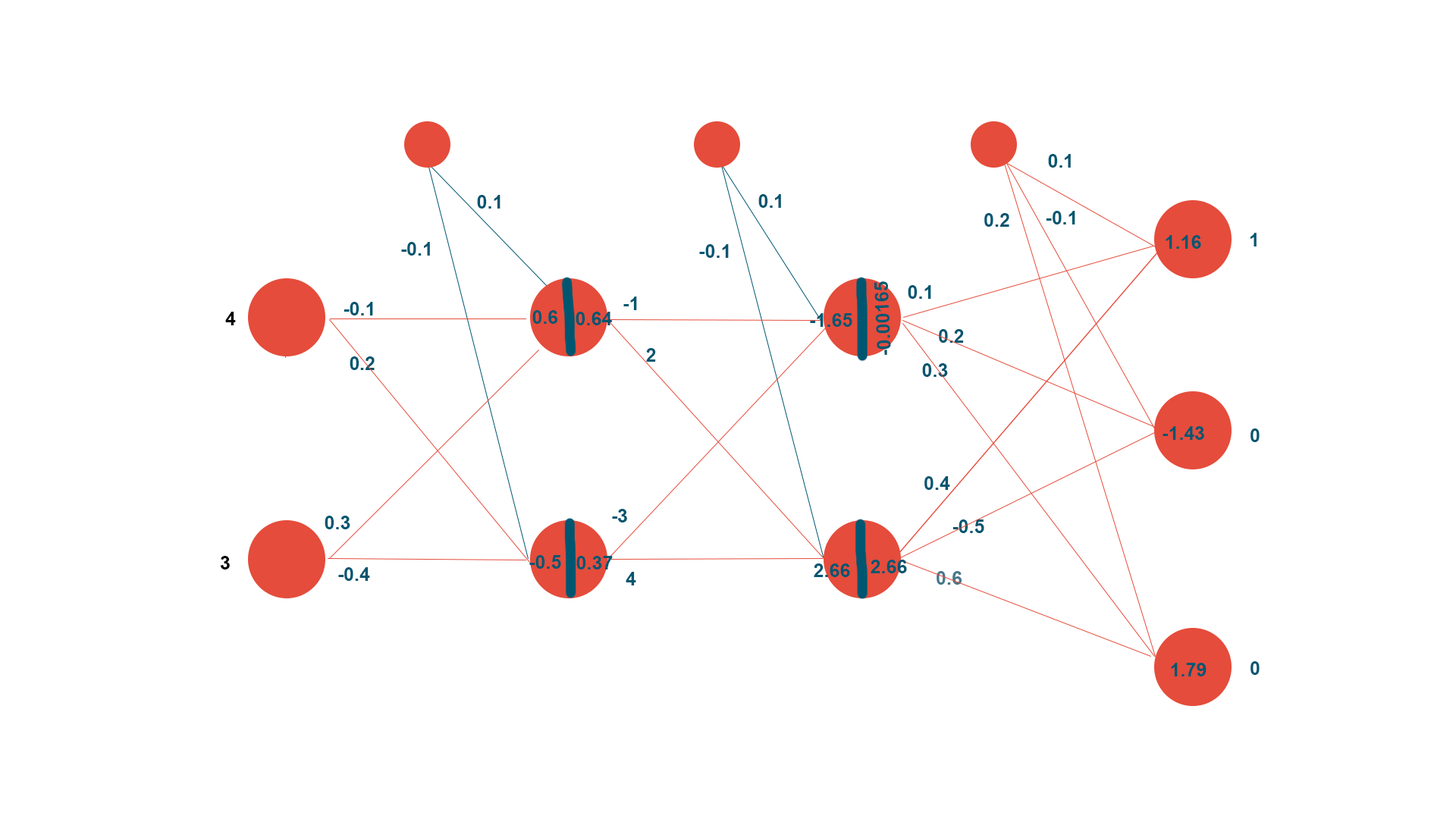
<style>
.page{position:relative;width:1456px;height:819px;background:#ffffff}
.page>*{position:absolute;margin:0}
.t1{font:19px "Arial-BoldMT";color:#005670}
.t2{font:19px "Arial-BoldMT";color:#000000}
.t3{font:19px "Arial-BoldMT";color:#47788b}
</style>
<div class="page">
<p class="t1" style="left:1048px;top:154px;width:23px;height:14px">0.1</p>
<p class="t1" style="left:477px;top:195px;width:23px;height:14px">0.1</p>
<p class="t1" style="left:758px;top:194px;width:23px;height:14px">0.1</p>
<p class="t1" style="left:984px;top:213px;width:25px;height:14px">0.2</p>
<p class="t1" style="left:1046px;top:211px;width:29px;height:13px">-0.1</p>
<p class="t1" style="left:1250px;top:233px;width:7px;height:13px">1</p>
<p class="t1" style="left:401px;top:242px;width:29px;height:14px">-0.1</p>
<p class="t1" style="left:699px;top:244px;width:30px;height:14px">-0.1</p>
<p class="t1" style="left:1166px;top:235px;width:35px;height:14px">1.16</p>
<p class="t1" style="left:874px;top:281px;width:17px;height:74px;rotate:-93deg">-0.00165</p>
<p class="t1" style="left:908px;top:285px;width:23px;height:14px">0.1</p>
<p class="t1" style="left:344px;top:302px;width:29px;height:13px">-0.1</p>
<p class="t1" style="left:623px;top:297px;width:14px;height:13px">-1</p>
<p class="t2" style="left:225px;top:312px;width:11px;height:13px">4</p>
<p class="t1" style="left:532px;top:310px;width:26px;height:14px">0.6</p>
<p class="t1" style="left:576px;top:312px;width:36px;height:13px">0.64</p>
<p class="t1" style="left:810px;top:313px;width:42px;height:14px">-1.65</p>
<p class="t1" style="left:939px;top:329px;width:25px;height:14px">0.2</p>
<p class="t1" style="left:646px;top:348px;width:10px;height:14px">2</p>
<p class="t1" style="left:350px;top:356px;width:25px;height:14px">0.2</p>
<p class="t1" style="left:922px;top:363px;width:26px;height:14px">0.3</p>
<p class="t1" style="left:1163px;top:426px;width:41px;height:14px">-1.43</p>
<p class="t1" style="left:1250px;top:428px;width:10px;height:14px">0</p>
<p class="t1" style="left:924px;top:476px;width:26px;height:14px">0.4</p>
<p class="t1" style="left:612px;top:509px;width:15px;height:13px">-3</p>
<p class="t1" style="left:325px;top:516px;width:25px;height:13px">0.3</p>
<p class="t1" style="left:952px;top:519px;width:32px;height:14px">-0.5</p>
<p class="t2" style="left:220px;top:556px;width:10px;height:14px">3</p>
<p class="t1" style="left:529px;top:555px;width:32px;height:14px">-0.5</p>
<p class="t1" style="left:576px;top:556px;width:37px;height:14px">0.37</p>
<p class="t1" style="left:338px;top:567px;width:32px;height:14px">-0.4</p>
<p class="t1" style="left:814px;top:563px;width:36px;height:14px">2.66</p>
<p class="t1" style="left:871px;top:560px;width:36px;height:13px">2.66</p>
<p class="t1" style="left:626px;top:572px;width:10px;height:13px">4</p>
<p class="t3" style="left:937px;top:571px;width:25px;height:14px">0.6</p>
<p class="t1" style="left:1171px;top:663px;width:35px;height:13px">1.79</p>
<p class="t1" style="left:1250px;top:661px;width:10px;height:14px">0</p>
</div>
